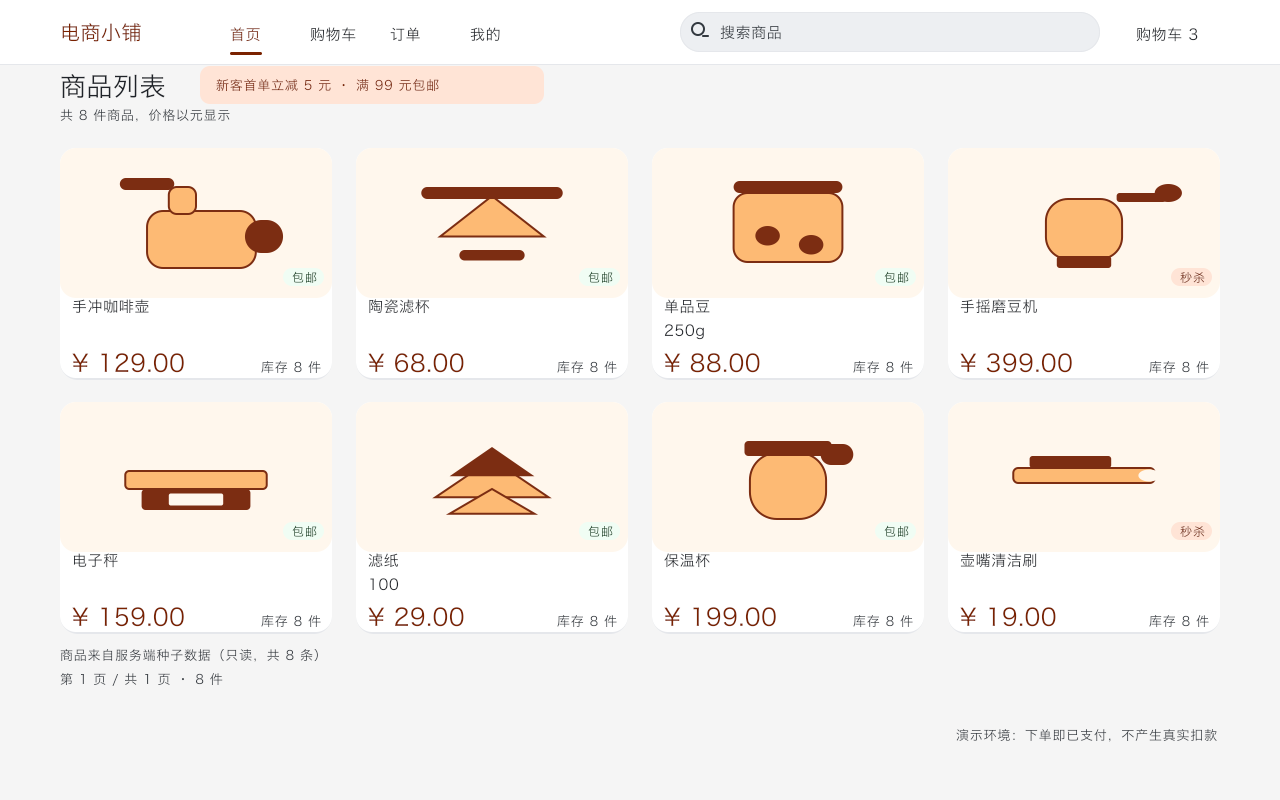
<style>
.page{position:relative;width:1280px;height:800px;background:#f5f5f5}
.page>*{position:absolute;margin:0}
.t1{font:20px "HiraginoSansGB-Regular";letter-spacing:0.024em;color:#7a2200}
.t2{font:15px "HiraginoSansGB-Regular";letter-spacing:0.04em;color:#853d26}
.t3{font:15px "HiraginoSansGB-Regular";letter-spacing:0.04em;color:#262a2f}
.t4{font:15px "HiraginoSansGB-Regular";letter-spacing:0.04em;color:#282c31}
.t5{font:15px "HiraginoSansGB-Regular";letter-spacing:0.04em;color:#2a2d33}
.t6{font:15px "HiraginoSansGB-Regular";letter-spacing:0.04em;color:#333940}
.t7{font:15px "HiraginoSansGB-Regular";letter-spacing:0.04em;color:#23262c}
.t8{font:26px "HiraginoSansGB-Regular";letter-spacing:0.02em;color:#1f2329}
.t9{font:13px "HiraginoSansGB-Regular";letter-spacing:0.06em;color:#7d2908}
.t10{font:13px "HiraginoSansGB-Regular";letter-spacing:0.06em;color:#363b42}
.t11{font:12px "HiraginoSansGB-Regular";letter-spacing:0.08em}
.t12{font:12px "HiraginoSansGB-Regular";letter-spacing:0.08em;color:#79331b}
.t13{font:15px "HiraginoSansGB-Regular";letter-spacing:0.04em;color:#282b31}
.t14{font:15px "HiraginoSansGB-Regular";letter-spacing:0.04em;color:#23272c}
.t15{font:15px "HiraginoSansGB-Regular";letter-spacing:0.04em;color:#2f3337}
.t16{font:15px "HiraginoSansGB-Regular";letter-spacing:0.04em;color:#2c2f34}
.t17{font:24px "HiraginoSansGB-Regular";letter-spacing:0.022em;color:#7a2200}
.t18{font:13px "HiraginoSansGB-Regular";letter-spacing:0.06em;color:#474c51}
.t19{font:15px "HiraginoSansGB-Regular";letter-spacing:0.04em;color:#2d3035}
.t20{font:15px "HiraginoSansGB-Regular";letter-spacing:0.04em;color:#313439}
.t21{font:15px "HiraginoSansGB-Regular";letter-spacing:0.04em;color:#24282d}
.t22{font:15px "HiraginoSansGB-Regular";letter-spacing:0.04em;color:#2e3236}
.t23{font:15px "HiraginoSansGB-Regular";letter-spacing:0.04em;color:#1f2329}
.t24{font:13px "HiraginoSansGB-Regular";letter-spacing:0.06em;color:#333940}
.t25{font:13px "HiraginoSansGB-Regular";letter-spacing:0.06em;color:#40454b}
</style>
<div class="page">
<p class="t1" style="left:61px;top:23px;width:81px;height:20px">电商小铺</p>
<p class="t2" style="left:229px;top:27px;width:32px;height:16px">首页</p>
<p class="t3" style="left:309px;top:27px;width:48px;height:16px">购物车</p>
<p class="t4" style="left:389px;top:27px;width:32px;height:16px">订单</p>
<p class="t5" style="left:469px;top:27px;width:32px;height:15px">我的</p>
<p class="t6" style="left:719px;top:25px;width:63px;height:16px">搜索商品</p>
<p class="t7" style="left:1135px;top:27px;width:64px;height:16px">购物车 3</p>
<p class="t8" style="left:60px;top:74px;width:106px;height:25px">商品列表</p>
<p class="t9" style="left:215px;top:78px;width:225px;height:15px">新客首单立减 5 元 · 满 99 元包邮</p>
<p class="t10" style="left:59px;top:109px;width:172px;height:14px">共 8 件商品，价格以元显示</p>
<p class="t11" style="left:291px;top:271px;width:27px;height:13px">包邮</p>
<p class="t11" style="left:587px;top:271px;width:27px;height:13px">包邮</p>
<p class="t11" style="left:883px;top:271px;width:27px;height:13px">包邮</p>
<p class="t12" style="left:1179px;top:271px;width:27px;height:13px">秒杀</p>
<p class="t13" style="left:71px;top:299px;width:79px;height:15px">手冲咖啡壶</p>
<p class="t14" style="left:368px;top:299px;width:63px;height:16px">陶瓷滤杯</p>
<p class="t15" style="left:663px;top:299px;width:48px;height:16px">单品豆</p>
<p class="t16" style="left:959px;top:299px;width:79px;height:16px">手摇磨豆机</p>
<p class="t14" style="left:663px;top:324px;width:42px;height:17px">250g</p>
<p class="t17" style="left:71px;top:353px;width:114px;height:21px">¥ 129.00</p>
<p class="t17" style="left:367px;top:353px;width:98px;height:21px">¥ 68.00</p>
<p class="t17" style="left:663px;top:353px;width:98px;height:21px">¥ 88.00</p>
<p class="t17" style="left:959px;top:353px;width:114px;height:21px">¥ 399.00</p>
<p class="t18" style="left:260px;top:360px;width:62px;height:15px">库存 8 件</p>
<p class="t18" style="left:556px;top:360px;width:62px;height:15px">库存 8 件</p>
<p class="t18" style="left:852px;top:360px;width:62px;height:15px">库存 8 件</p>
<p class="t18" style="left:1148px;top:360px;width:62px;height:15px">库存 8 件</p>
<p class="t11" style="left:291px;top:525px;width:27px;height:13px">包邮</p>
<p class="t11" style="left:587px;top:525px;width:27px;height:13px">包邮</p>
<p class="t11" style="left:883px;top:525px;width:27px;height:13px">包邮</p>
<p class="t12" style="left:1179px;top:525px;width:27px;height:13px">秒杀</p>
<p class="t19" style="left:72px;top:553px;width:47px;height:16px">电子秤</p>
<p class="t20" style="left:367px;top:553px;width:33px;height:16px">滤纸</p>
<p class="t21" style="left:663px;top:553px;width:48px;height:16px">保温杯</p>
<p class="t22" style="left:959px;top:553px;width:79px;height:16px">壶嘴清洁刷</p>
<p class="t23" style="left:369px;top:578px;width:31px;height:14px">100</p>
<p class="t17" style="left:71px;top:607px;width:114px;height:21px">¥ 159.00</p>
<p class="t18" style="left:260px;top:614px;width:62px;height:15px">库存 8 件</p>
<p class="t17" style="left:367px;top:607px;width:98px;height:21px">¥ 29.00</p>
<p class="t18" style="left:556px;top:614px;width:62px;height:15px">库存 8 件</p>
<p class="t17" style="left:663px;top:607px;width:114px;height:21px">¥ 199.00</p>
<p class="t18" style="left:852px;top:614px;width:62px;height:15px">库存 8 件</p>
<p class="t17" style="left:959px;top:607px;width:98px;height:21px">¥ 19.00</p>
<p class="t18" style="left:1148px;top:614px;width:62px;height:15px">库存 8 件</p>
<p class="t24" style="left:59px;top:648px;width:260px;height:15px">商品来自服务端种子数据（只读，共 8 条）</p>
<p class="t24" style="left:59px;top:673px;width:165px;height:14px">第 1 页 / 共 1 页 · 8 件</p>
<p class="t25" style="left:955px;top:728px;width:263px;height:15px">演示环境：下单即已支付，不产生真实扣款</p>
</div>
